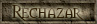
<style>
.page{position:relative;width:97px;height:24px}
.page>*{position:absolute;margin:0}
.t1{font:17.1px "Morpheus";color:#2d1b02}
</style>
<div class="page">
<p class="t1" style="left:12px;top:5px;width:73px;height:16px">Rechazar</p>
</div>
